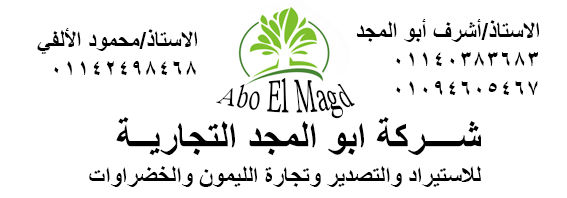
<style>
.page{position:relative;width:567px;height:198px;background:#ffffff}
.page>*{position:absolute;margin:0}
.t1{font:24px "Arial-BoldMT";color:#000000}
.t2{font:24px "TimesNewRomanPSMT";color:#000000}
.t3{font:40px "Arial-BoldMT";color:#000000}
.t4{font:25px "TimesNewRomanPS-BoldMT";color:#000001}
</style>
<div class="page">
<p class="t1" style="left:37px;top:28px;width:160px;height:47px">الاستاذ/محمود الألفي<br>01142498468</p>
<p class="t1" style="left:357px;top:19px;width:182px;height:76px">الاستاذ/أشرف أبو المجد<br>01140383683<br>01094605467</p>
<p class="t2" style="left:216px;top:77px;width:139px;height:42px">Abo El Magd</p>
<p class="t3" style="left:116px;top:117px;width:365px;height:39px">شــــركة ابو المجد التجاريــة</p>
<p class="t4" style="left:89px;top:166px;width:392px;height:21px">للاستيراد والتصدير وتجارة الليمون والخضراوات</p>
</div>
